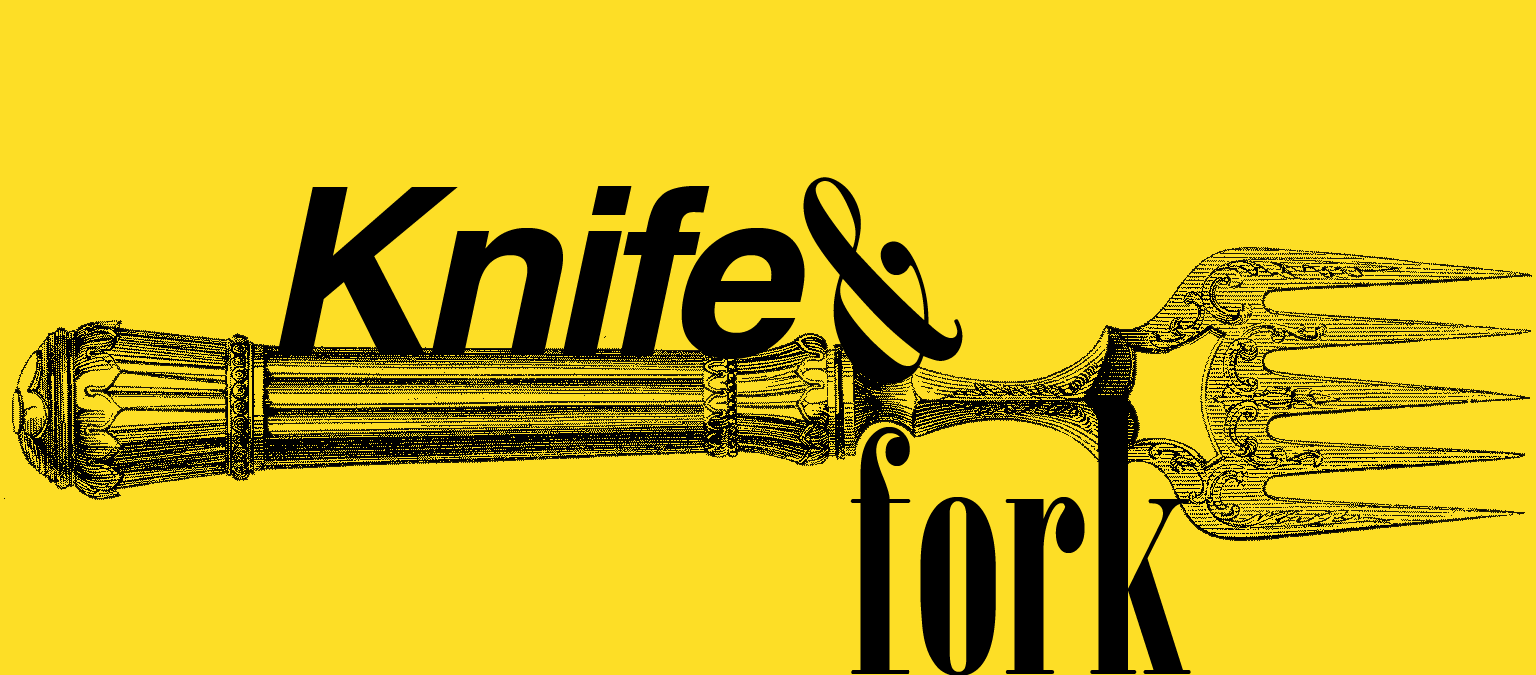
<style>
.page{position:relative;width:1536px;height:675px;background:#fdde26}
.page>*{position:absolute;margin:0}
.t1{font:291.4px "Onyx";letter-spacing:-0.025em;color:#000000}
.t2{font:233.3px "Helvetica-BoldOblique";letter-spacing:-0.05em;color:#000000}
</style>
<div class="page">
<p class="t1" style="left:803px;top:177px;width:160px;height:207px;rotate:-25deg">&amp;</p>
<p class="t2" style="left:277px;top:186px;width:528px;height:173px">Knife</p>
</div>
